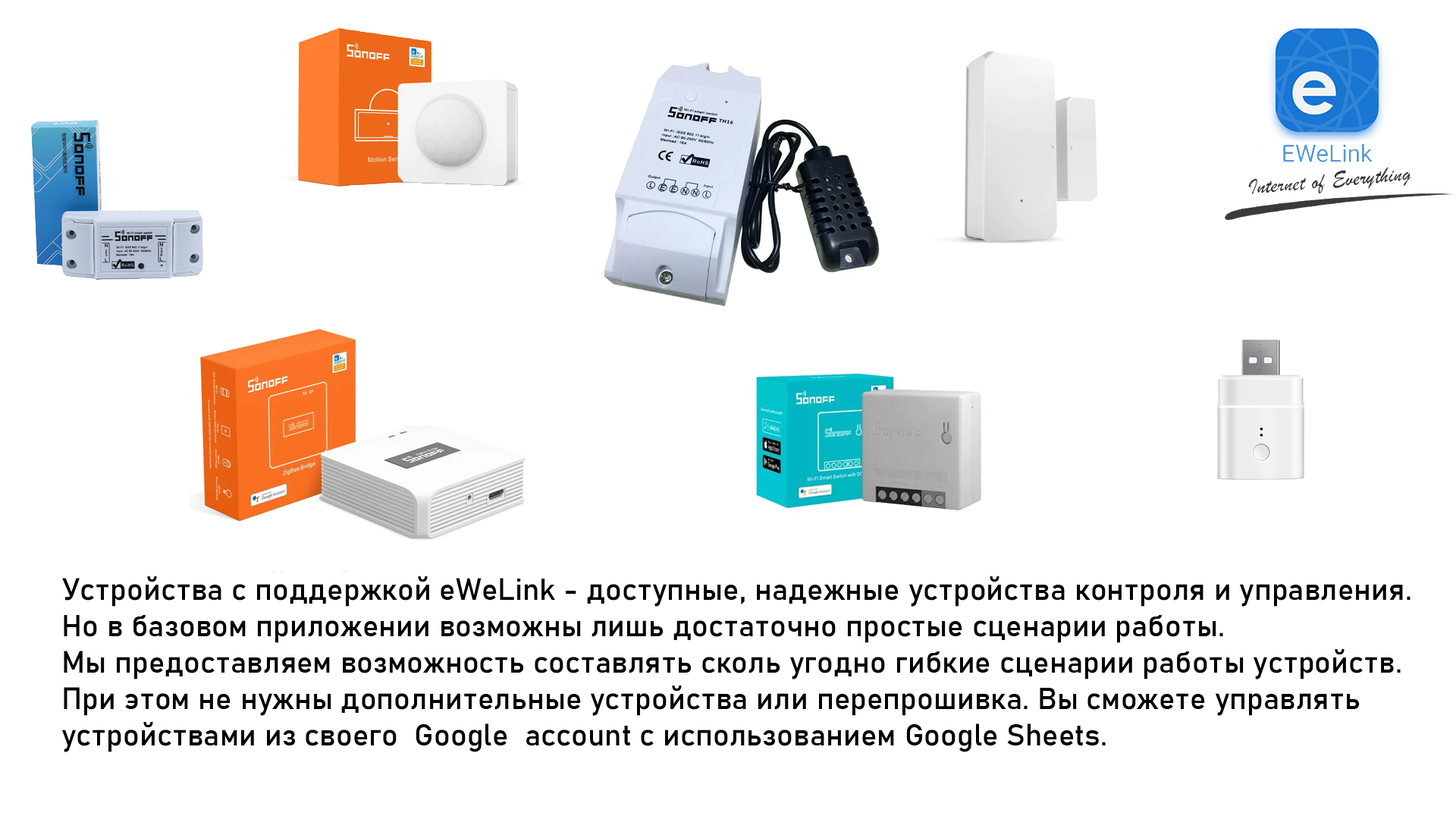
<style>
.page{position:relative;width:1456px;height:819px;background:#ffffff}
.page>*{position:absolute;margin:0}
.t1{font:30.3px "Bahnschrift";color:#000000}
</style>
<div class="page">
<p class="t1" style="left:62px;top:576px;width:1348px;height:176px">Устройства с поддержкой eWeLink - доступные, надежные устройства контроля и управления.<br>Но в базовом приложении возможны лишь достаточно простые сценарии работы.<br>Мы предоставляем возможность составлять сколь угодно гибкие сценарии работы устройств.<br>При этом не нужны дополнительные устройства или перепрошивка. Вы сможете управлять<br>устройствами из своего  Google  account с использованием Google Sheets.</p>
</div>
